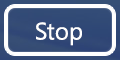
<style>
.page{position:relative;width:120px;height:60px}
.page>*{position:absolute;margin:0}
.t1{font:24px "SegoeUI";color:#ffffff}
</style>
<div class="page">
<p class="t1" style="left:36px;top:22px;width:46px;height:24px">Stop</p>
</div>
